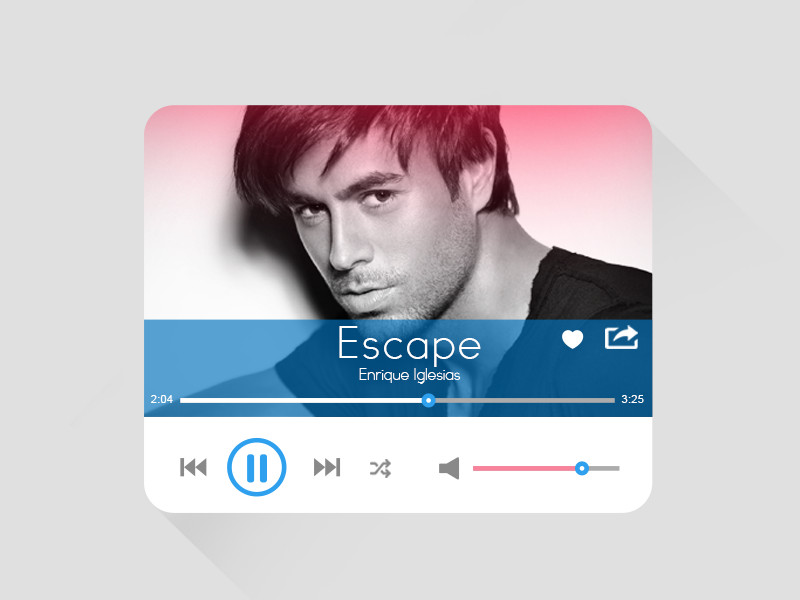
<style>
.page{position:relative;width:800px;height:600px;background:#e0e0e0}
.page>*{position:absolute;margin:0}
.t1{font:41.1px "TYPOGRAPHPRO-Light";letter-spacing:0.007em;color:#ffffff}
.t2{font:14.5px "TYPOGRAPHPRO-Light";letter-spacing:-0.036em;color:#ffffff}
.t3{font:11.4px "ArialMT";letter-spacing:0.015em;color:#ffffff}
</style>
<div class="page">
<p class="t1" style="left:339px;top:326px;width:142px;height:41px">Escape</p>
<p class="t2" style="left:359px;top:368px;width:102px;height:16px">Enrique Iglesias</p>
<p class="t3" style="left:151px;top:395px;width:22px;height:8px">2:04</p>
<p class="t3" style="left:621px;top:395px;width:23px;height:8px">3:25</p>
</div>
